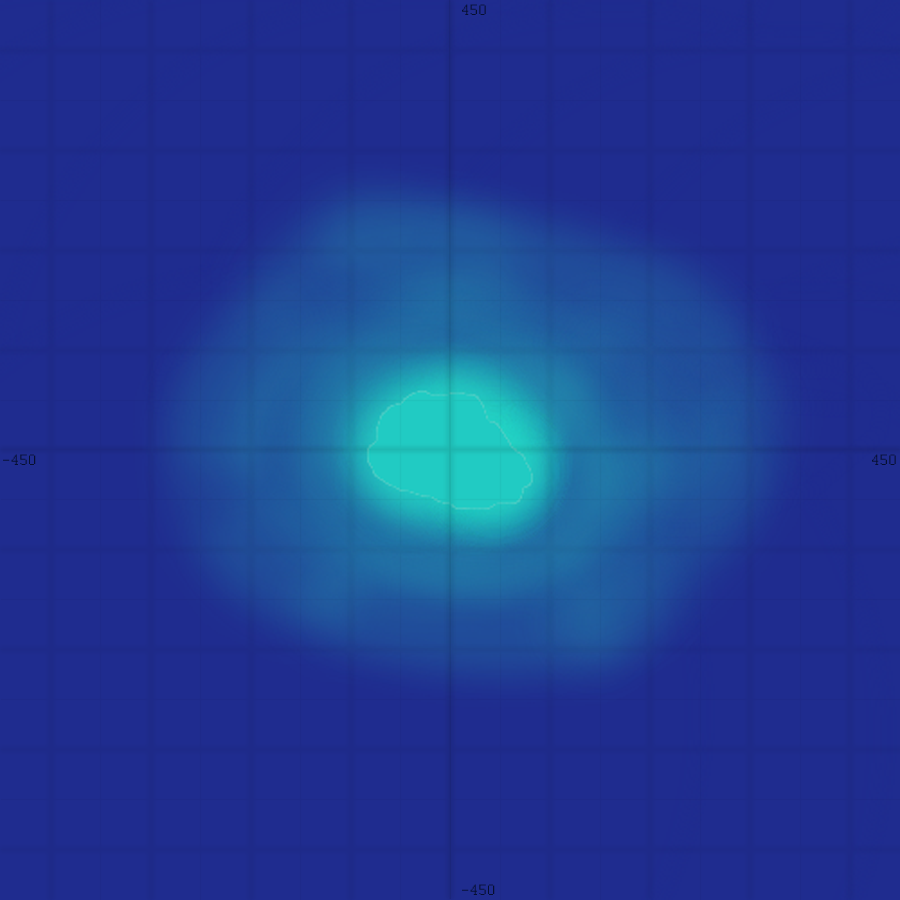
<style>
.page{position:relative;width:900px;height:900px;background:#1f2c8f}
.page>*{position:absolute;margin:0}
.t1{font:16.7px "Courier";letter-spacing:-0.05em;color:#060f2f}
</style>
<div class="page">
<p class="t1" style="left:462px;top:4px;width:24px;height:11px">450</p>
<p class="t1" style="left:3px;top:454px;width:33px;height:11px">-450</p>
<p class="t1" style="left:872px;top:454px;width:24px;height:11px">450</p>
<p class="t1" style="left:462px;top:884px;width:33px;height:11px">-450</p>
</div>
